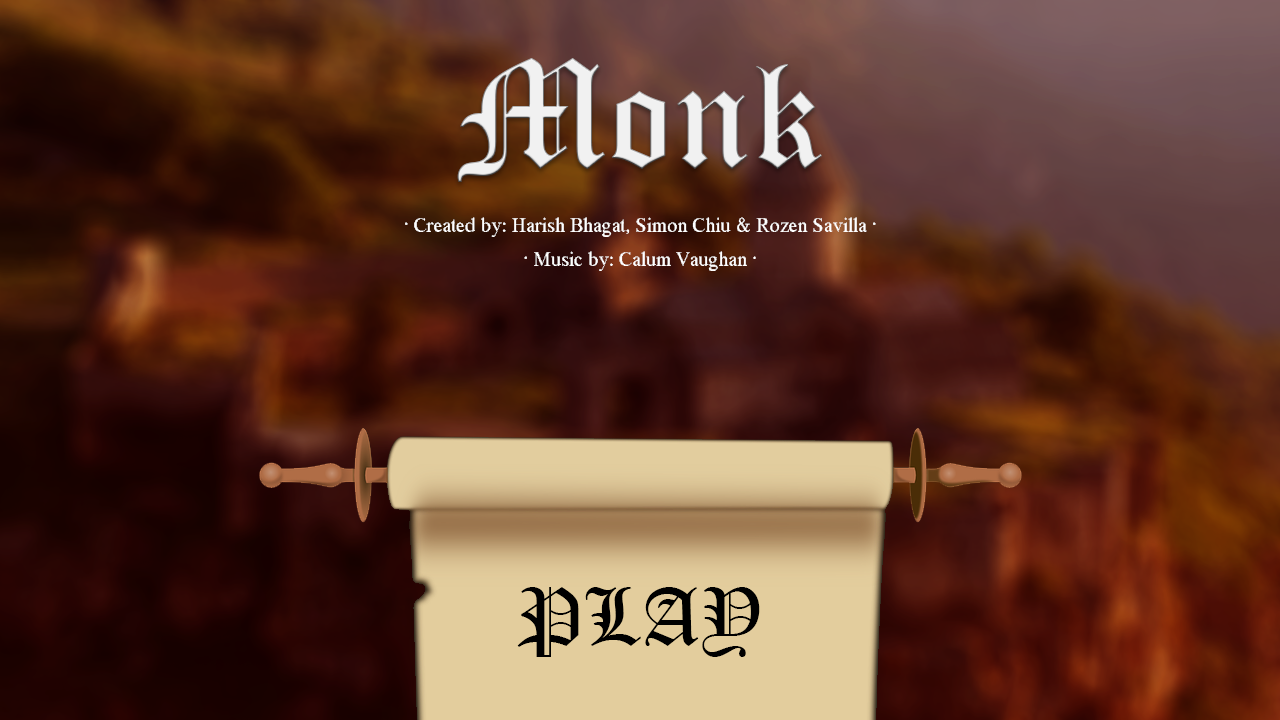
<style>
.page{position:relative;width:1280px;height:720px}
.page>*{position:absolute;margin:0}
.t1{font:150px "OldEnglishTextMT";color:#f1f1f1}
.t2{font:20px "MS Serif";color:#ffffff}
.t3{font:80px "OldEnglishTextMT";color:#000000}
</style>
<div class="page">
<p class="t1" style="left:457px;top:58px;width:365px;height:124px">Monk</p>
<p class="t2" style="left:405px;top:217px;width:471px;height:20px">· Created by: Harish Bhagat, Simon Chiu &amp; Rozen Savilla ·</p>
<p class="t2" style="left:524px;top:251px;width:232px;height:20px">· Music by: Calum Vaughan ·</p>
<p class="t3" style="left:517px;top:587px;width:243px;height:70px">PLAY</p>
</div>
